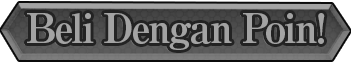
<style>
.page{position:relative;width:351px;height:63px}
.page>*{position:absolute;margin:0}
.t1{font:40px "RyuminPro-ExBold";letter-spacing:-0.06em;color:#a3a3a3}
</style>
<div class="page">
<p class="t1" style="left:27px;top:13px;width:298px;height:37px">Beli Dengan Poin!</p>
</div>
